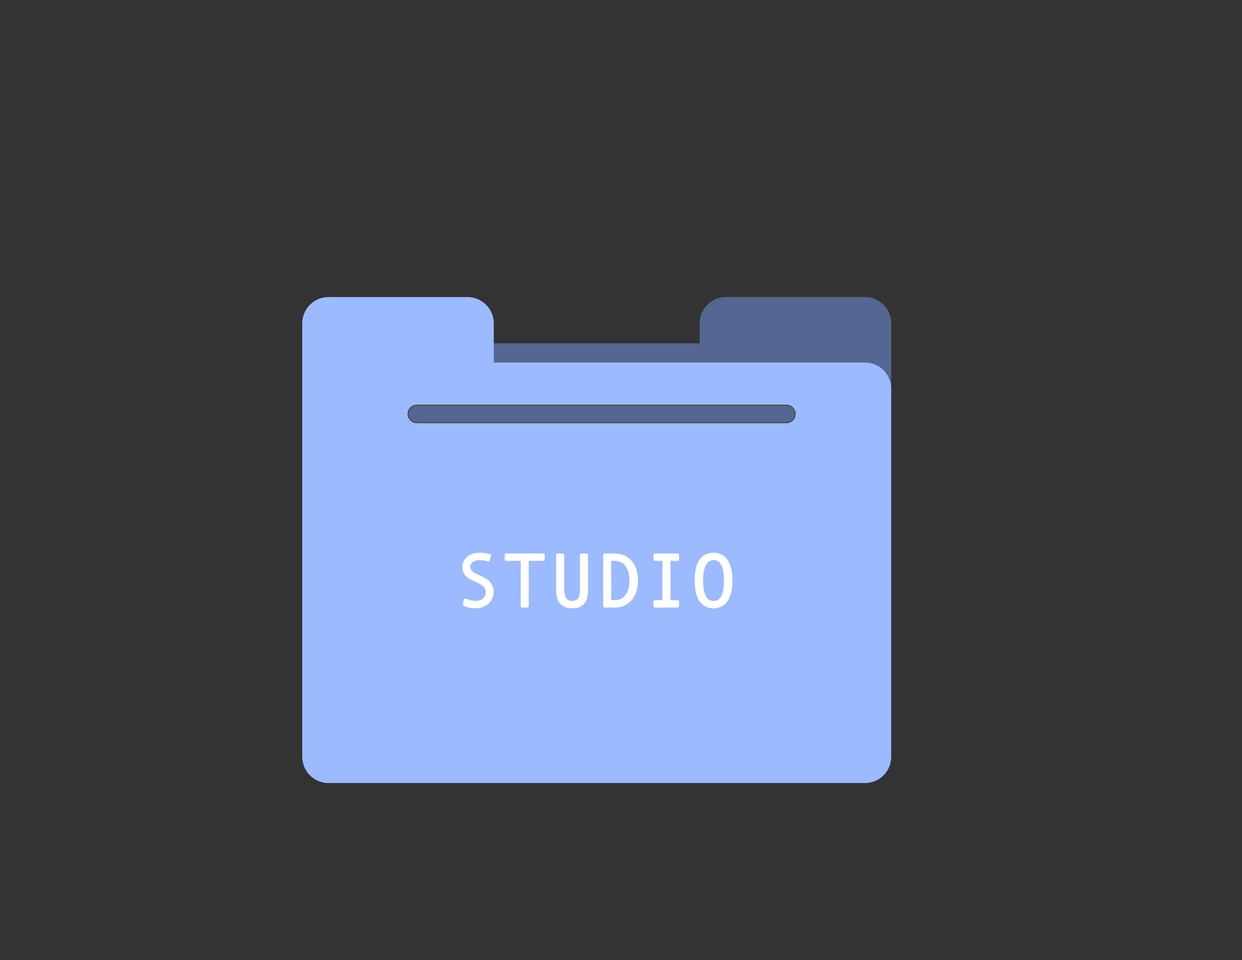
<style>
.page{position:relative;width:1242px;height:960px;background:#333333}
.page>*{position:absolute;margin:0}
.t1{font:75.3px "AndaleMono";color:#ffffff;text-transform:uppercase;font-weight:bold}
</style>
<div class="page">
<p class="t1" style="left:462px;top:553px;width:271px;height:55px">studio</p>
</div>
